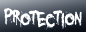
<style>
.page{position:relative;width:86px;height:32px}
.page>*{position:absolute;margin:0}
.t1{font:29.2px "YouMurdererBB";color:#ffffff;scale:0.84 1}
</style>
<div class="page">
<p class="t1" style="left:4px;top:8px;width:79px;height:23px">Protection</p>
</div>
